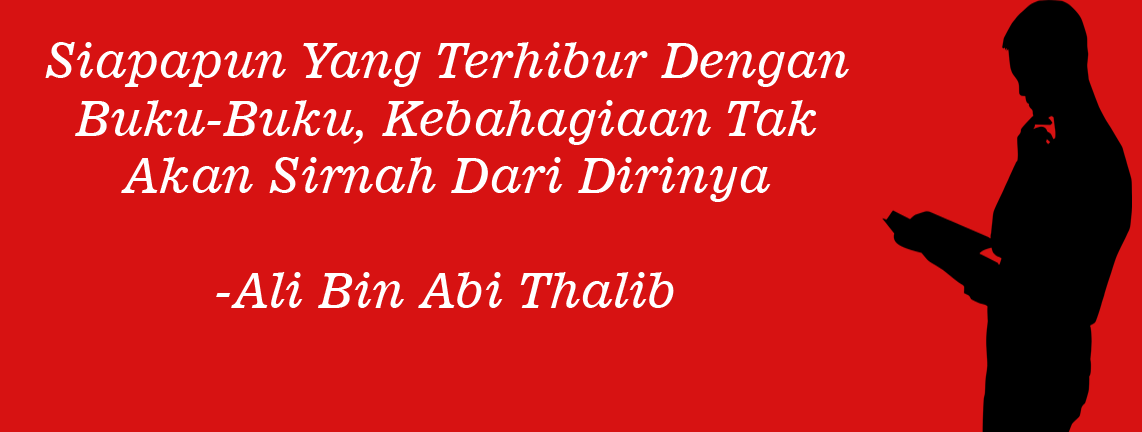
<style>
.page{position:relative;width:1142px;height:432px;background:#d71212}
.page>*{position:absolute;margin:0}
.t1{font:48px "News701BT-ItalicA";color:#ffffff}
</style>
<div class="page">
<p class="t1" style="left:45px;top:42px;width:804px;height:266px;text-align:center">Siapapun Yang Terhibur Dengan Buku-Buku, Kebahagiaan Tak Akan Sirnah Dari Dirinya<br><br>-Ali Bin Abi Thalib</p>
</div>
